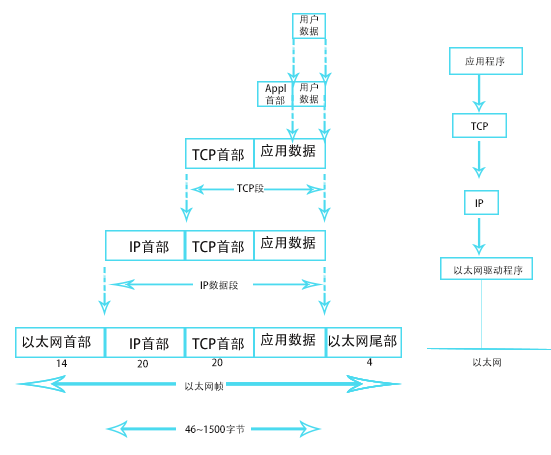
<style>
.page{position:relative;width:551px;height:455px;background:#ffffff}
.page>*{position:absolute;margin:0}
.t1{font:10px "AdobeHeitiStd-Regular";color:#141212}
.t2{font:10px "AdobeHeitiStd-Regular"}
</style>
<div class="page">
<p class="t1" style="left:299px;top:14px;width:20px;height:22px">用户<br>数据</p>
<p class="t2" style="left:465px;top:56px;width:40px;height:10px">应用程序</p>
<p class="t1" style="left:265px;top:84px;width:21px;height:21px">Appl<br>首部</p>
<p class="t1" style="left:299px;top:82px;width:20px;height:22px">用户<br>数据</p>
<p class="t1" style="left:471px;top:122px;width:17px;height:8px">TCP</p>
<p class="t1" style="left:237px;top:184px;width:27px;height:9px">TCP段</p>
<p class="t1" style="left:475px;top:199px;width:9px;height:8px">IP</p>
<p class="t1" style="left:454px;top:265px;width:69px;height:10px">以太网驱动程序</p>
<p class="t1" style="left:200px;top:280px;width:38px;height:10px">IP数据段</p>
<p class="t1" style="left:56px;top:359px;width:11px;height:8px">14</p>
<p class="t1" style="left:137px;top:359px;width:11px;height:9px">20</p>
<p class="t1" style="left:212px;top:358px;width:11px;height:9px">20</p>
<p class="t1" style="left:367px;top:358px;width:6px;height:8px">4</p>
<p class="t1" style="left:473px;top:357px;width:28px;height:10px">以太网</p>
<p class="t1" style="left:185px;top:381px;width:39px;height:10px">以太网帧</p>
<p class="t1" style="left:185px;top:424px;width:60px;height:10px">46~1500字节</p>
</div>
